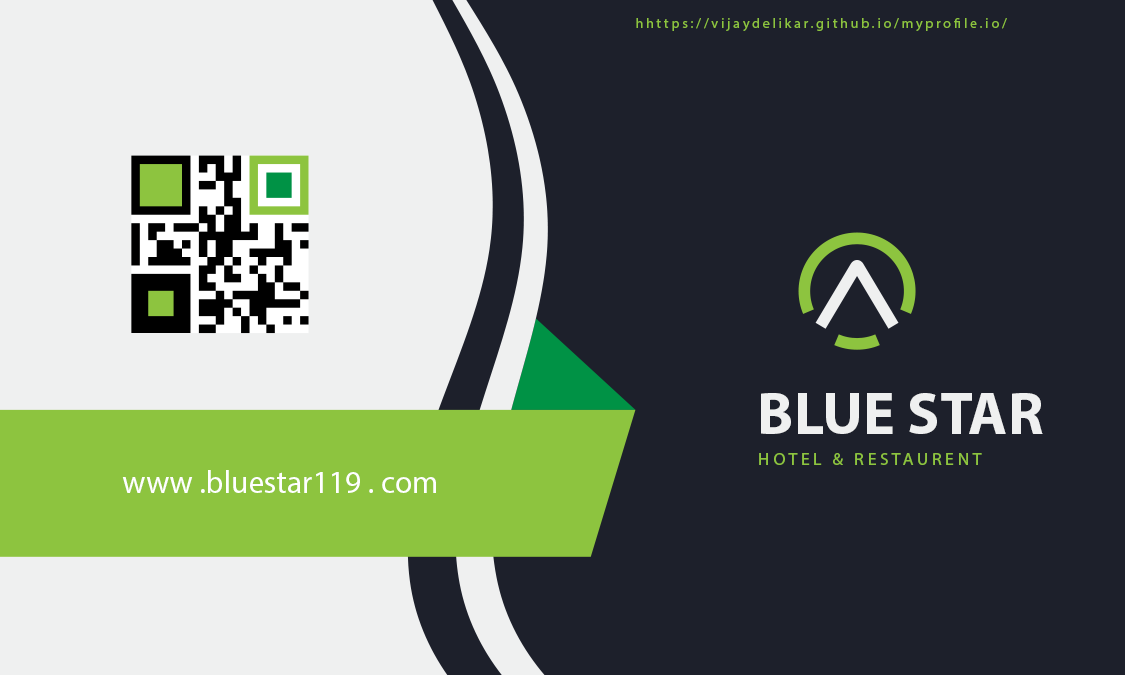
<style>
.page{position:relative;width:1125px;height:675px;background:#1d202b}
.page>*{position:absolute;margin:0}
.t1{font:14px "MyriadPro-Regular";letter-spacing:0.2em;color:#8dc43f}
.t2{font:60px "MyriadPro-Bold";color:#eff0f0}
.t3{font:17.8px "MyriadPro-Regular";letter-spacing:0.2em;color:#8dc43f}
.t4{font:31.5px "MyriadPro-Regular";color:#ffffff}
</style>
<div class="page">
<p class="t1" style="left:636px;top:18px;width:371px;height:13px">hhttps://vijaydelikar.github.io/myprofile.io/</p>
<p class="t2" style="left:761px;top:393px;width:282px;height:41px">BLUE STAR</p>
<p class="t3" style="left:759px;top:453px;width:223px;height:12px">HOTEL &amp; RESTAURENT</p>
<p class="t4" style="left:122px;top:470px;width:314px;height:23px">www .bluestar119 . com</p>
</div>
